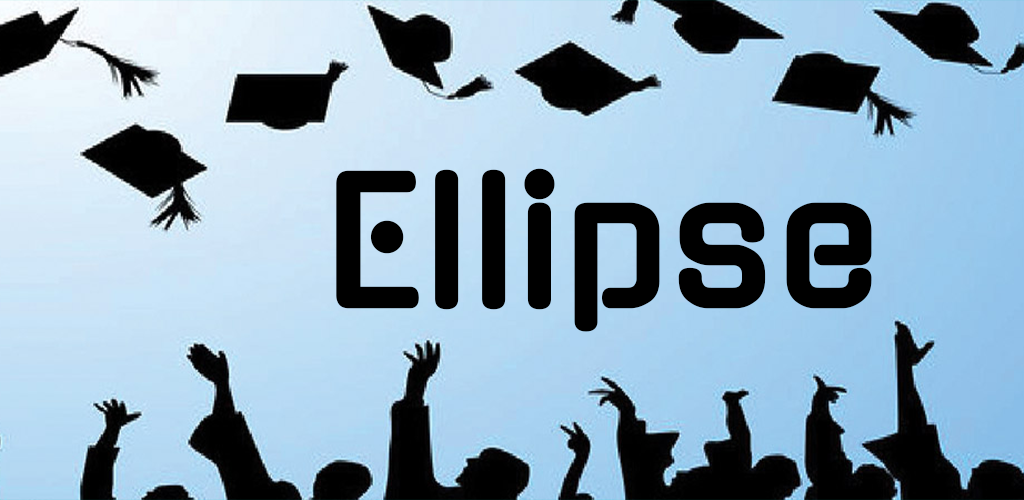
<style>
.page{position:relative;width:1024px;height:500px}
.page>*{position:absolute;margin:0}
.t1{font:166.7px "Gugi-Regular";color:#000000;font-weight:bold}
</style>
<div class="page">
<p class="t1" style="left:336px;top:168px;width:536px;height:164px">Ellipse</p>
</div>
